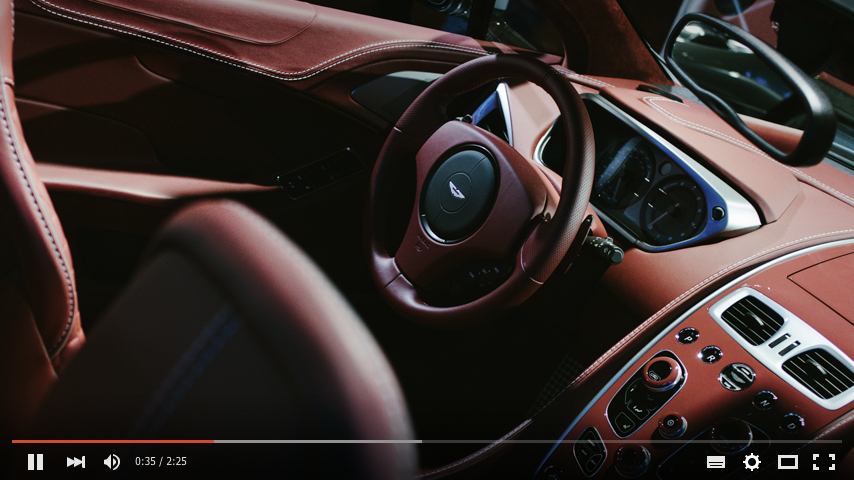
<style>
.page{position:relative;width:854px;height:480px}
.page>*{position:absolute;margin:0}
.t1{font:10px "Tahoma";letter-spacing:0.015em;color:#e6e6e6;text-transform:uppercase}
</style>
<div class="page">
<p class="t1" style="left:135px;top:456px;width:52px;height:11px">0:35 / 2:25</p>
</div>
